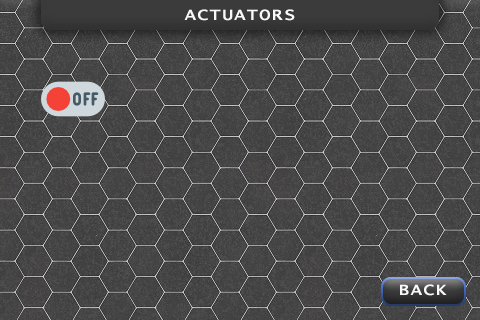
<style>
.page{position:relative;width:480px;height:320px}
.page>*{position:absolute;margin:0}
.t1{font:16px "LucidaConsole";letter-spacing:0.06em;color:#f9f9f9;font-weight:bold;scale:1.12 1}
</style>
<div class="page">
<p class="t1" style="left:184px;top:9px;width:111px;height:12px">ACTUATORS</p>
<p class="t1" style="left:400px;top:284px;width:47px;height:12px">BACK</p>
</div>
